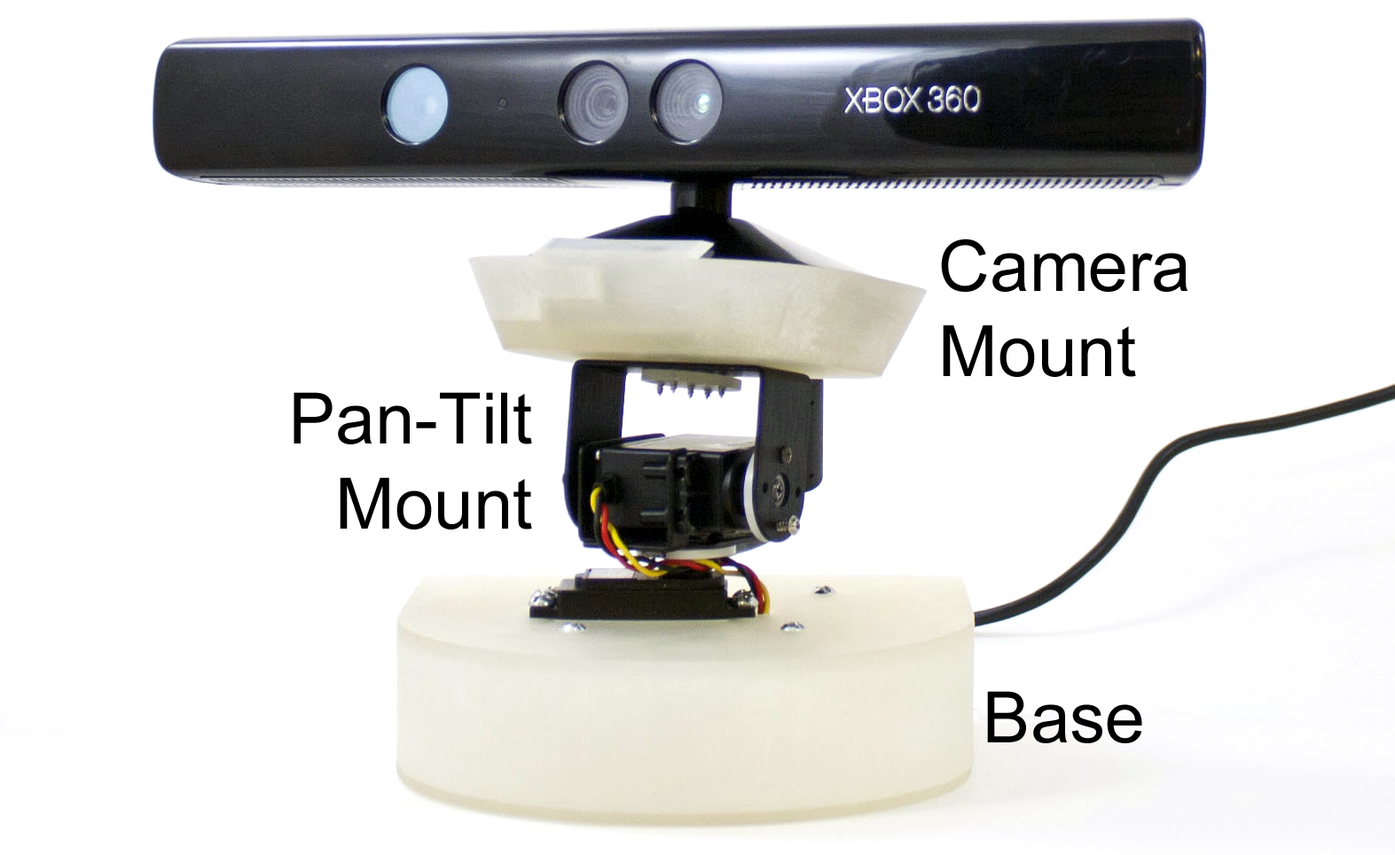
<style>
.page{position:relative;width:1395px;height:855px;background:#ffffff}
.page>*{position:absolute;margin:0}
.t1{font:70.9px "ArialMT";color:#000000}
</style>
<div class="page">
<p class="t1" style="left:941px;top:239px;width:247px;height:138px">Camera<br>Mount</p>
<p class="t1" style="left:294px;top:392px;width:238px;height:137px;text-align:right">Pan-Tilt<br>Mount</p>
<p class="t1" style="left:987px;top:691px;width:155px;height:52px">Base</p>
</div>
